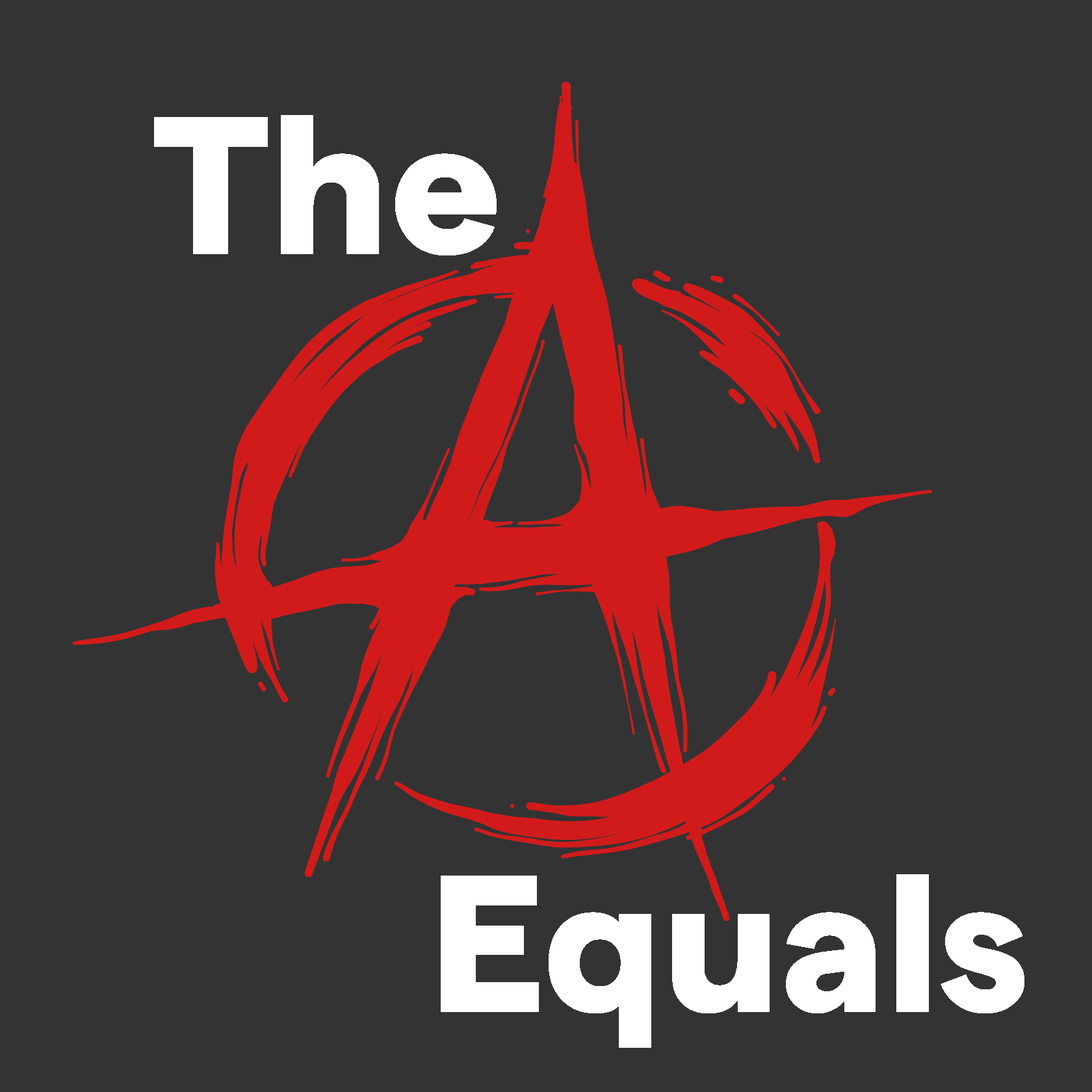
<style>
.page{position:relative;width:1092px;height:1092px;background:#333333}
.page>*{position:absolute;margin:0}
.t1{font:196.3px "Matter-Heavy";color:#ffffff}
.t2{font:195px "Matter-Heavy";color:#ffffff}
</style>
<div class="page">
<p class="t1" style="left:154px;top:115px;width:343px;height:140px">The</p>
<p class="t2" style="left:441px;top:874px;width:583px;height:174px">Equals</p>
</div>
